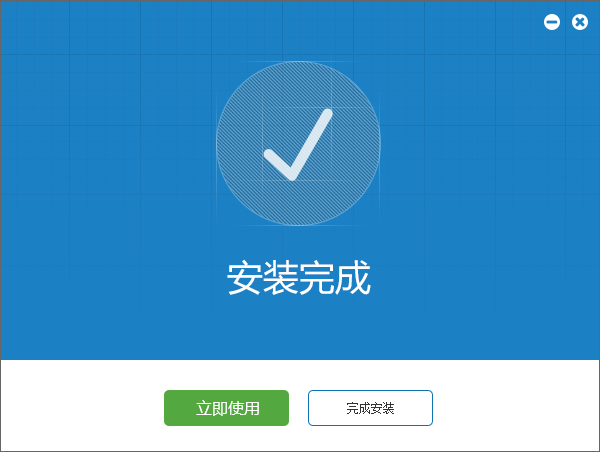
<style>
.page{position:relative;width:600px;height:452px;background:#1b80c4}
.page>*{position:absolute;margin:0}
.t1{font:36px "MicrosoftYaHei";color:#ffffff}
.t2{font:16px "MicrosoftYaHei";color:#ffffff}
.t3{font:12px "SimSun";color:#333333}
</style>
<div class="page">
<p class="t1" style="left:227px;top:259px;width:144px;height:36px">安装完成</p>
<p class="t2" style="left:196px;top:400px;width:63px;height:16px">立即使用</p>
<p class="t3" style="left:347px;top:402px;width:47px;height:12px">完成安装</p>
</div>
